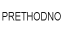
<style>
.page{position:relative;width:63px;height:32px;background:#ffffff}
.page>*{position:absolute;margin:0}
.t1{font:12px "ArialNarrow";color:#151515;scale:0.94 1}
</style>
<div class="page">
<p class="t1" style="left:2px;top:12px;width:59px;height:9px">PRETHODNO</p>
</div>
